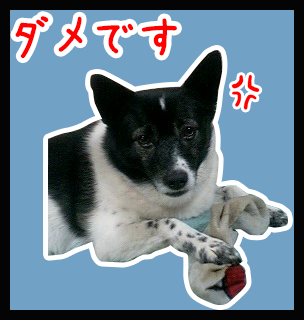
<style>
.page{position:relative;width:304px;height:320px;background:#71a1c5}
.page>*{position:absolute;margin:0}
.t1{font:56.7px "APJapanesefont";color:#ff0000}
</style>
<div class="page">
<p class="t1" style="left:15px;top:16px;width:162px;height:43px">ダメです</p>
</div>
